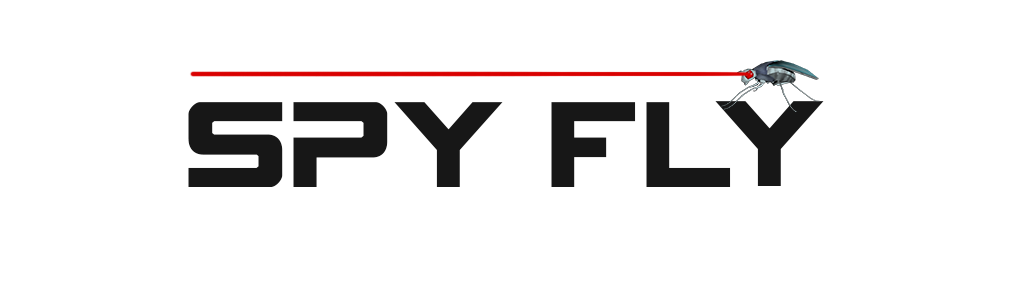
<style>
.page{position:relative;width:1024px;height:300px;background:#ffffff}
.page>*{position:absolute;margin:0}
.t1{font:136.4px "SpyAgencyExpanded";color:#171717;scale:0.82 1}
</style>
<div class="page">
<p class="t1" style="left:188px;top:102px;width:543px;height:85px">SPY FL</p>
<p class="t1" style="left:715px;top:101px;width:109px;height:85px">Y</p>
</div>
